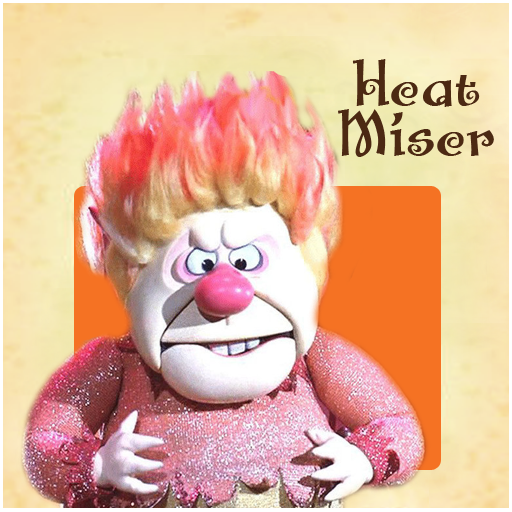
<style>
.page{position:relative;width:512px;height:512px}
.page>*{position:absolute;margin:0}
.t1{font:66.7px/50px "SantasBigSecretBB";color:#4c2913}
</style>
<div class="page">
<p class="t1" style="left:338px;top:59px;width:156px;height:98px;text-align:center">Heat<br>Miser</p>
</div>
